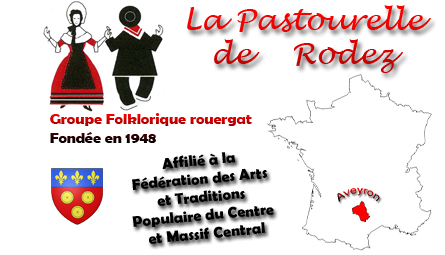
<style>
.page{position:relative;width:445px;height:255px;background:#ffffff}
.page>*{position:absolute;margin:0}
.t1{font:28.9px "LucidaHandwriting-Italic";scale:1.03 1}
.t2{font:15.3px "BerlinSansFBDemi-Bold";scale:1.03 1}
.t3{font:15.3px "BerlinSansFBDemi-Bold";color:#000000;scale:1.03 1}
</style>
<div class="page">
<p class="t1" style="left:187px;top:5px;width:244px;height:68px;text-align:center">La Pastourelle<br>de    Rodez</p>
<p class="t2" style="left:50px;top:113px;width:202px;height:30px">Groupe Folklorique rouergat<br>Fondée en 1948</p>
<p class="t3" style="left:132px;top:152px;width:142px;height:92px;text-align:center;rotate:-5deg">Affilié à la <br>Fédération des Arts <br>et Traditions <br>Populaire du Centre <br>et Massif Central</p>
</div>
